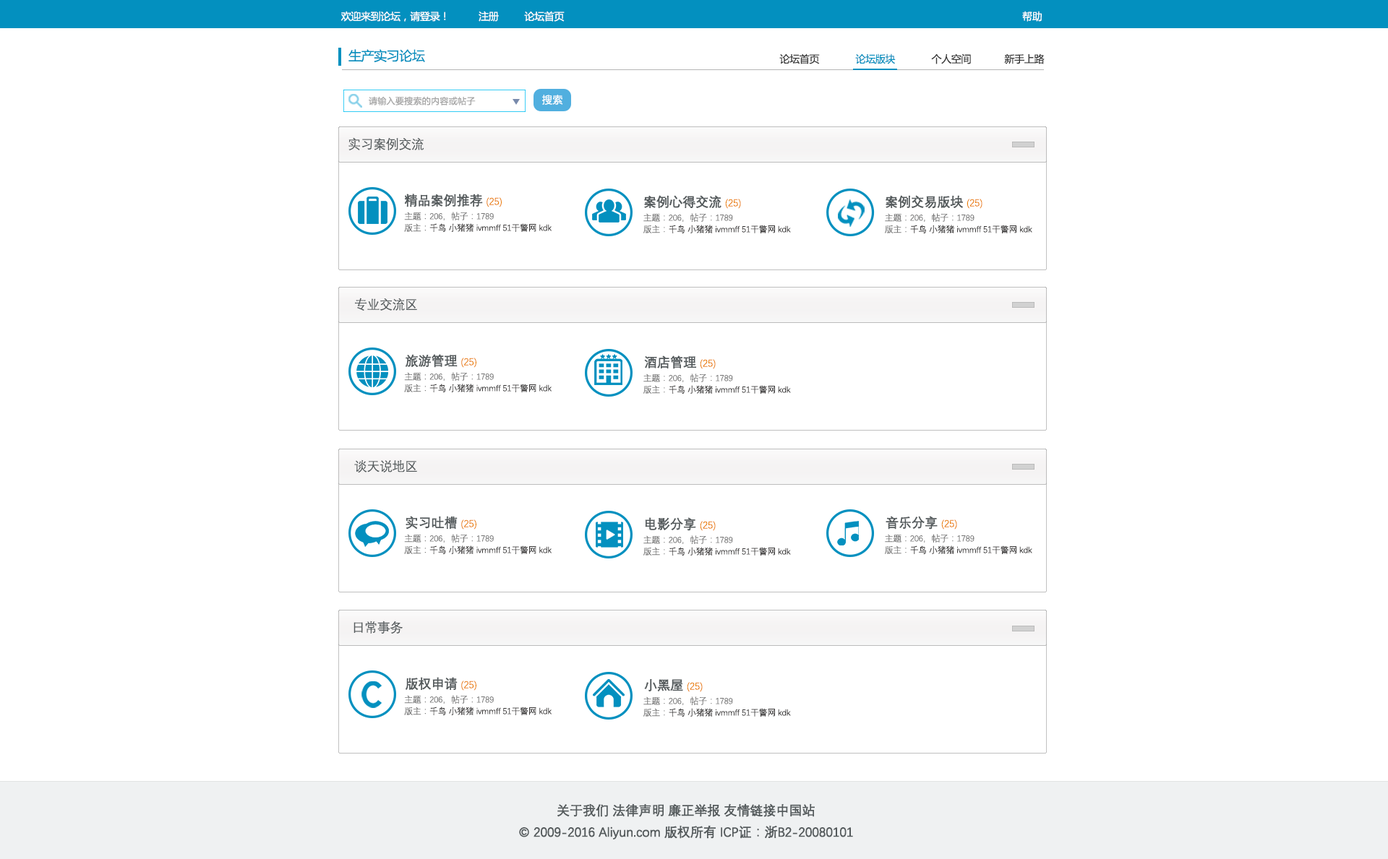
<style>
.page{position:relative;width:1388px;height:859px;background:#ffffff}
.page>*{position:absolute;margin:0}
.t1{font:10.1px "MicrosoftYaHei";letter-spacing:-0.025em;color:#ffffff}
.t2{font:13px "MicrosoftYaHei";letter-spacing:-0.025em;color:#0390bf}
.t3{font:10.1px "MicrosoftYaHei";letter-spacing:-0.025em;color:#383838}
.t4{font:10.1px "MicrosoftYaHei";letter-spacing:-0.025em;color:#0390bf}
.t5{font:8.7px "MicrosoftYaHei";letter-spacing:0.025em;color:#a3a3a3}
.t6{font:10.1px "MicrosoftYaHei";letter-spacing:0.025em;color:#ffffff}
.t7{font:13px "DengXian-Regular";letter-spacing:-0.025em;color:#545a5c}
.t8{font:13px "DengXian-Regular";letter-spacing:-0.025em;color:#545a5c;font-weight:bold}
.t9{font:10.1px "DengXian-Regular";letter-spacing:-0.025em;color:#ea7f00}
.t10{font:8.7px/11.6px "DengXian-Regular";letter-spacing:-0.025em;color:#373535}
.t11{font:8.7px/11.6px "DengXian-Regular";letter-spacing:-0.025em;color:#747474}
.t12{font:13px/21.7px "DengXian-Regular";letter-spacing:-0.025em;color:#545a5c;font-weight:bold}
</style>
<div class="page">
<p class="t1" style="left:340px;top:11px;width:106px;height:11px">欢迎来到论坛，请登录！</p>
<p class="t1" style="left:478px;top:11px;width:21px;height:11px">注册</p>
<p class="t1" style="left:524px;top:11px;width:40px;height:11px">论坛首页</p>
<p class="t1" style="left:1022px;top:11px;width:19px;height:11px">帮助</p>
<p class="t2" style="left:348px;top:49px;width:77px;height:14px">生产实习论坛</p>
<p class="t3" style="left:779px;top:53px;width:41px;height:11px">论坛首页</p>
<p class="t4" style="left:855px;top:53px;width:40px;height:11px">论坛版块</p>
<p class="t3" style="left:931px;top:53px;width:40px;height:11px">个人空间</p>
<p class="t3" style="left:1004px;top:53px;width:40px;height:11px">新手上路</p>
<p class="t5" style="left:369px;top:96px;width:107px;height:10px">请输入要搜索的内容或帖子</p>
<p class="t6" style="left:542px;top:95px;width:21px;height:10px">搜索</p>
<p class="t7" style="left:348px;top:137px;width:76px;height:13px">实习案例交流</p>
<p class="t8" style="left:404px;top:194px;width:98px;height:13px">精品案例推荐 <span class="t9">(25)</span></p>
<p class="t8" style="left:644px;top:195px;width:97px;height:14px">案例心得交流 <span class="t9">(25)</span></p>
<p class="t8" style="left:885px;top:195px;width:97px;height:14px">案例交易版块 <span class="t9">(25)</span></p>
<p class="t10" style="left:404px;top:212px;width:147px;height:20px"><span class="t11">主题：206，帖子：1789<br>版主：</span>千鸟 小猪猪 ivmmff 51干警网 kdk</p>
<p class="t10" style="left:643px;top:213px;width:148px;height:20px"><span class="t11">主题：206，帖子：1789<br>版主：</span>千鸟 小猪猪 ivmmff 51干警网 kdk</p>
<p class="t10" style="left:885px;top:213px;width:147px;height:20px"><span class="t11">主题：206，帖子：1789<br>版主：</span>千鸟 小猪猪 ivmmff 51干警网 kdk</p>
<p class="t7" style="left:355px;top:298px;width:62px;height:13px">专业交流区</p>
<p class="t8" style="left:405px;top:354px;width:71px;height:14px">旅游管理 <span class="t9">(25)</span></p>
<p class="t8" style="left:644px;top:356px;width:72px;height:13px">酒店管理 <span class="t9">(25)</span></p>
<p class="t10" style="left:404px;top:372px;width:147px;height:20px"><span class="t11">主题：206，帖子：1789<br>版主：</span>千鸟 小猪猪 ivmmff 51干警网 kdk</p>
<p class="t10" style="left:643px;top:374px;width:148px;height:20px"><span class="t11">主题：206，帖子：1789<br>版主：</span>千鸟 小猪猪 ivmmff 51干警网 kdk</p>
<p class="t7" style="left:354px;top:460px;width:63px;height:13px">谈天说地区</p>
<p class="t8" style="left:405px;top:516px;width:71px;height:14px">实习吐槽 <span class="t9">(25)</span></p>
<p class="t8" style="left:645px;top:517px;width:71px;height:14px">电影分享 <span class="t9">(25)</span></p>
<p class="t8" style="left:885px;top:516px;width:72px;height:14px">音乐分享 <span class="t9">(25)</span></p>
<p class="t10" style="left:404px;top:534px;width:147px;height:20px"><span class="t11">主题：206，帖子：1789<br>版主：</span>千鸟 小猪猪 ivmmff 51干警网 kdk</p>
<p class="t10" style="left:643px;top:536px;width:148px;height:20px"><span class="t11">主题：206，帖子：1789<br>版主：</span>千鸟 小猪猪 ivmmff 51干警网 kdk</p>
<p class="t10" style="left:885px;top:534px;width:147px;height:20px"><span class="t11">主题：206，帖子：1789<br>版主：</span>千鸟 小猪猪 ivmmff 51干警网 kdk</p>
<p class="t7" style="left:353px;top:621px;width:50px;height:13px">日常事务</p>
<p class="t8" style="left:405px;top:677px;width:71px;height:14px">版权申请 <span class="t9">(25)</span></p>
<p class="t9" style="left:644px;top:679px;width:58px;height:13px"><span class="t8">小黑屋 </span>(25)</p>
<p class="t10" style="left:404px;top:695px;width:147px;height:21px"><span class="t11">主题：206，帖子：1789<br>版主：</span>千鸟 小猪猪 ivmmff 51干警网 kdk</p>
<p class="t10" style="left:643px;top:697px;width:148px;height:20px"><span class="t11">主题：206，帖子：1789<br>版主：</span>千鸟 小猪猪 ivmmff 51干警网 kdk</p>
<p class="t12" style="left:519px;top:804px;width:334px;height:36px;text-align:center">关于我们 法律声明 廉正举报 友情链接中国站<br>© 2009-2016 Aliyun.com 版权所有 ICP证：浙B2-20080101</p>
</div>
